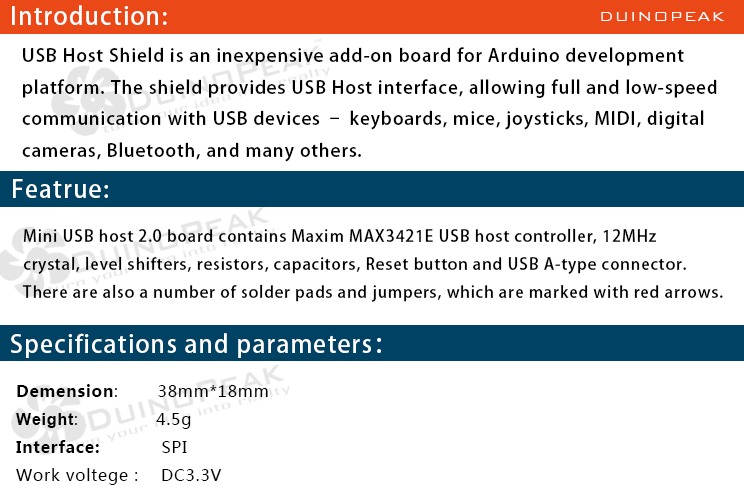
<style>
.page{position:relative;width:744px;height:498px;background:#ffffff}
.page>*{position:absolute;margin:0}
.t1{font:24px "AdobeHeitiStd-Regular";letter-spacing:0.05em;color:#ffffff}
.t2{font:18px "BankGothicBT-Light";letter-spacing:0.05em;color:#ffffff}
.t3{font:18px "AdobeHeitiStd-Regular";letter-spacing:0.05em;color:#000000}
.t4{font:16px "AdobeHeitiStd-Regular";letter-spacing:0.05em;color:#000000}
.t5{font:16px "MicrosoftYaHei";letter-spacing:0.05em;color:#000000}
.t6{font:16px "MicrosoftYaHei-Bold";letter-spacing:0.05em;color:#000000}
.t7{font:16px "Arial-BoldMT";letter-spacing:0.05em;color:#000000}
</style>
<div class="page">
<p class="t1" style="left:12px;top:5px;width:155px;height:20px">Introduction:</p>
<p class="t2" style="left:601px;top:12px;width:124px;height:9px">DUINOPEAK</p>
<p class="t3" style="left:22px;top:47px;width:695px;height:115px">USB Host Shield is an inexpensive add-on board for Arduino development <br>platform. The shield provides USB Host interface, allowing full and low-speed <br>communication with USB devices – keyboards, mice, joysticks, MIDI, digital <br>cameras, Bluetooth, and many others.</p>
<p class="t1" style="left:13px;top:179px;width:95px;height:19px">Featrue:</p>
<p class="t4" style="left:22px;top:228px;width:701px;height:74px">Mini USB host 2.0 board contains Maxim MAX3421E USB host controller, 12MHz <br>crystal, level shifters, resistors, capacitors, Reset button and USB A-type connector.<br>There are also a number of solder pads and jumpers, which are marked with red arrows.</p>
<p class="t1" style="left:11px;top:333px;width:370px;height:25px">Specifications and parameters：</p>
<p class="t5" style="left:16px;top:384px;width:252px;height:101px"><span class="t6">Demension</span>:       38mm*18mm<br><span class="t7">Weight</span>:              4.5g<br><span class="t6">Interface:           </span>SPI<br>Work voltege :    DC3.3V</p>
</div>
